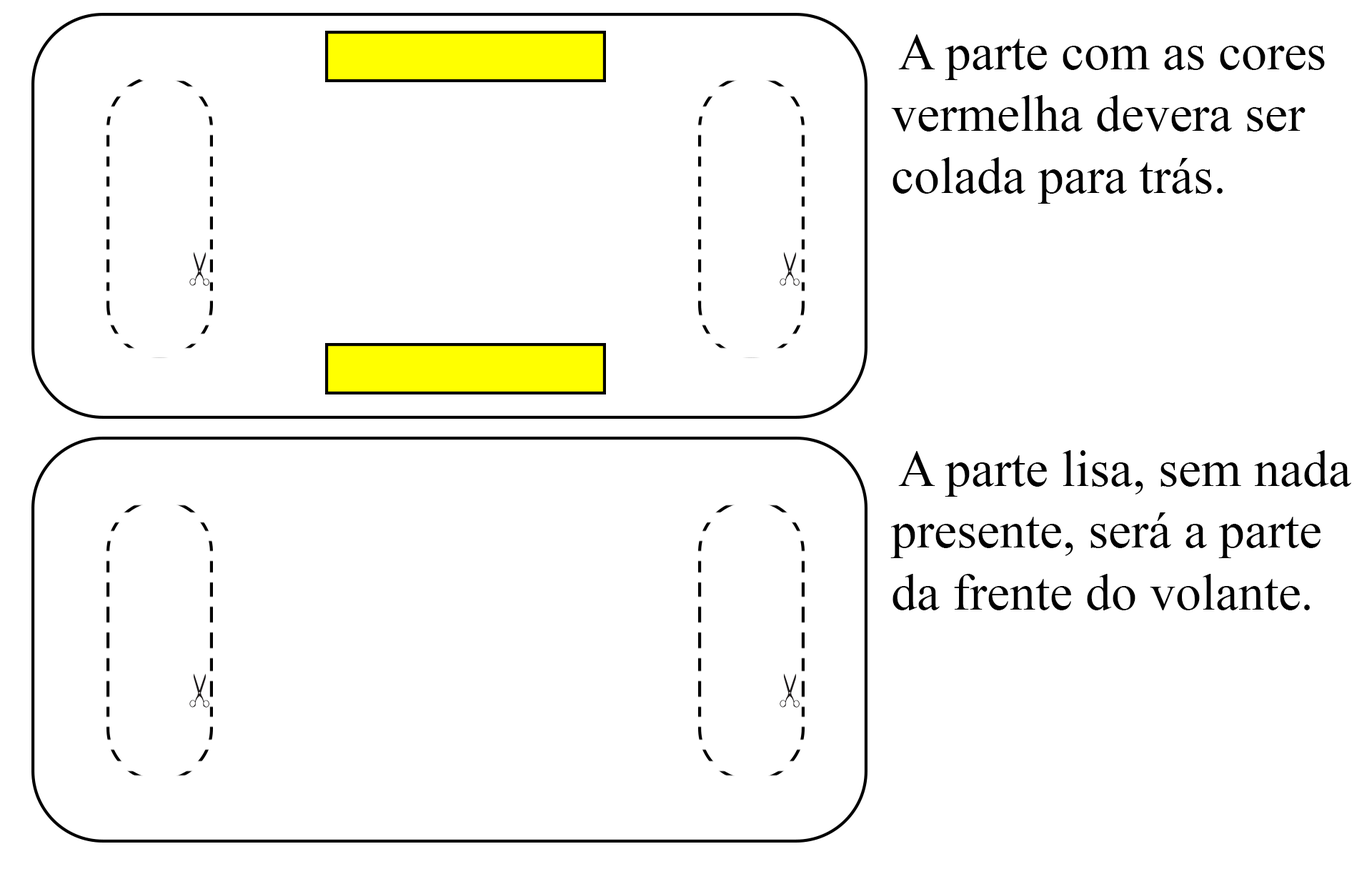
<style>
.page{position:relative;width:1372px;height:869px;background:#ffffff}
.page>*{position:absolute;margin:0}
.t1{font:51.5px "TimesNewRomanPSMT";color:#000000}
</style>
<div class="page">
<p class="t1" style="left:891px;top:34px;width:434px;height:170px">A parte com as cores vermelha devera ser colada para trás.</p>
<p class="t1" style="left:890px;top:450px;width:461px;height:160px">A parte lisa, sem nada presente, será a parte da frente do volante.</p>
</div>
